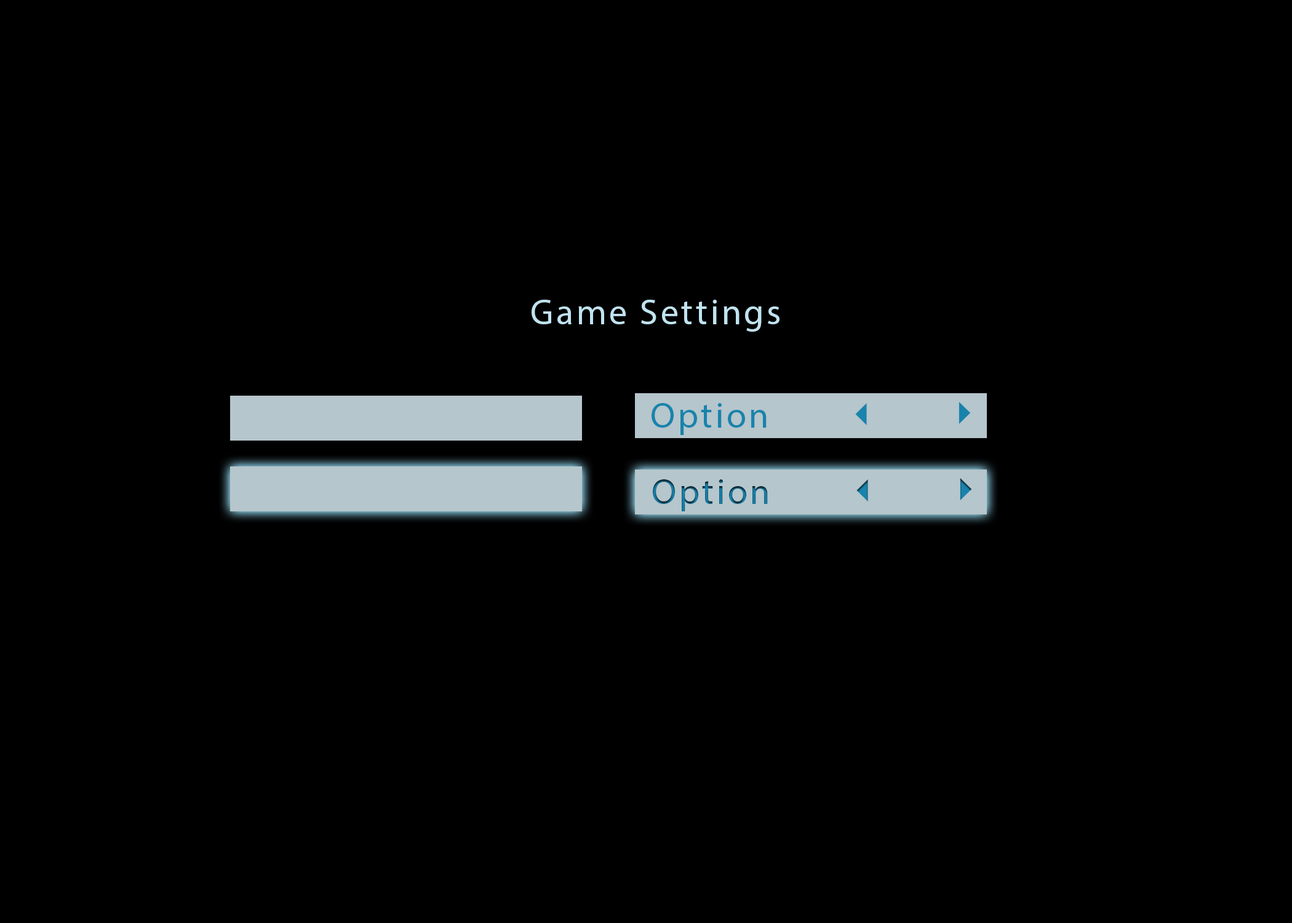
<style>
.page{position:relative;width:1292px;height:923px;background:#000000}
.page>*{position:absolute;margin:0}
.t1{font:35.9px "MyriadPro-Regular";letter-spacing:0.075em;color:#c1e3f0}
.t2{font:35.9px "MyriadPro-Regular";letter-spacing:0.075em;color:#1883ac}
.t3{font:35.9px "MyriadPro-Regular";letter-spacing:0.075em}
</style>
<div class="page">
<p class="t1" style="left:532px;top:300px;width:248px;height:32px">Game Settings</p>
<p class="t2" style="left:652px;top:403px;width:115px;height:32px">Option</p>
<p class="t3" style="left:653px;top:479px;width:115px;height:32px">Option</p>
</div>
